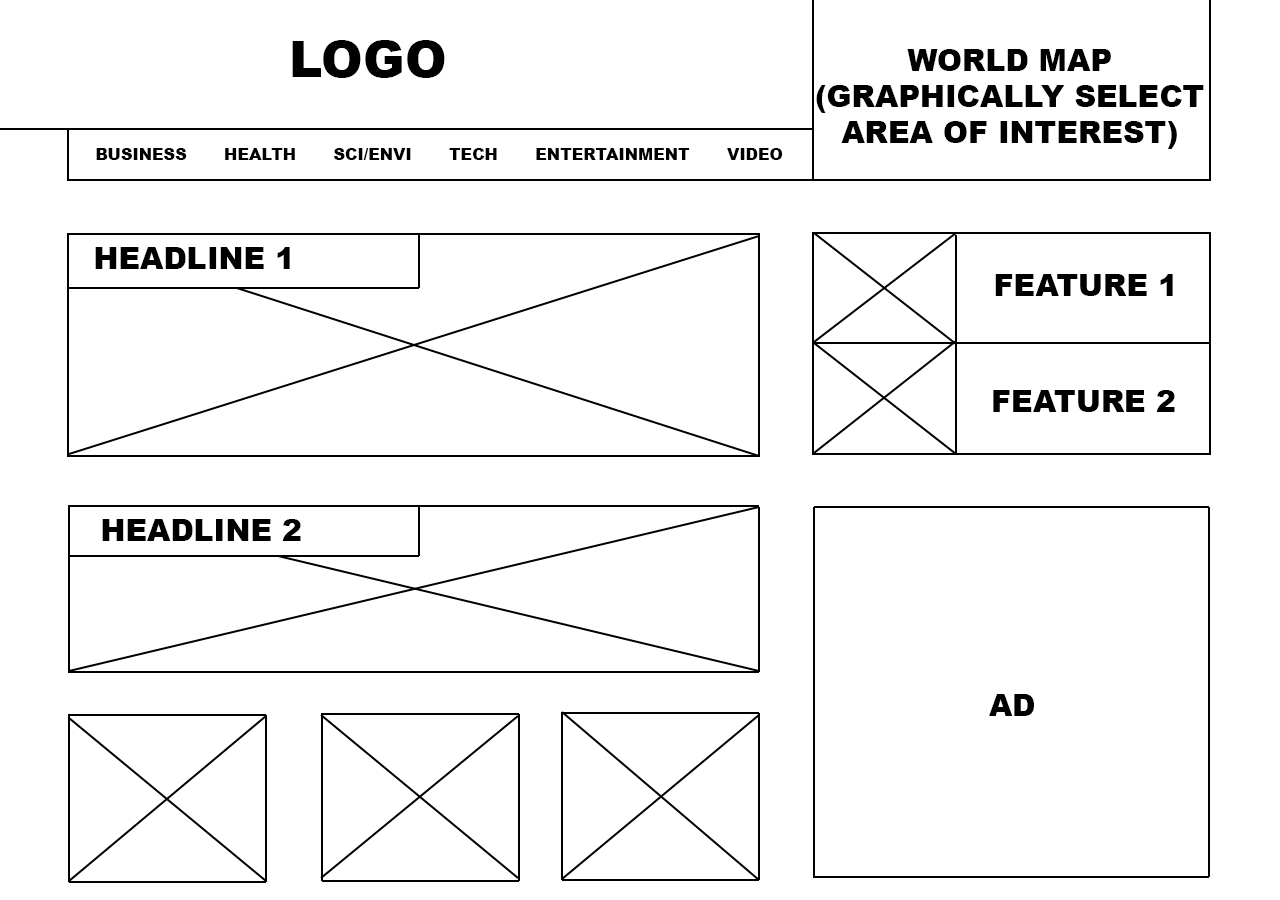
<style>
.page{position:relative;width:1280px;height:900px;background:#ffffff}
.page>*{position:absolute;margin:0}
.t1{font:50px "Arial-Black";color:#000000}
.t2{font:30px "Arial-Black";color:#000000}
.t3{font:16px "Arial-Black";color:#000000}
</style>
<div class="page">
<p class="t1" style="left:292px;top:40px;width:153px;height:38px">LOGO</p>
<p class="t2" style="left:816px;top:49px;width:388px;height:100px;text-align:center">WORLD MAP<br>(GRAPHICALLY SELECT<br>AREA OF INTEREST)</p>
<p class="t3" style="left:96px;top:148px;width:687px;height:12px">BUSINESS       HEALTH       SCI/ENVI       TECH       ENTERTAINMENT       VIDEO</p>
<p class="t2" style="left:95px;top:247px;width:195px;height:22px">HEADLINE 1</p>
<p class="t2" style="left:995px;top:274px;width:178px;height:22px">FEATURE 1</p>
<p class="t2" style="left:993px;top:390px;width:182px;height:22px">FEATURE 2</p>
<p class="t2" style="left:102px;top:519px;width:199px;height:22px">HEADLINE 2</p>
<p class="t2" style="left:989px;top:694px;width:45px;height:22px">AD</p>
</div>
